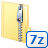
<style>
.page{position:relative;width:48px;height:48px;background:#ffffff}
.page>*{position:absolute;margin:0}
.t1{font:12px "Tahoma-Bold";color:#0064c8}
</style>
<div class="page">
<p class="t1" style="left:30px;top:35px;width:14px;height:9px">7z</p>
</div>
